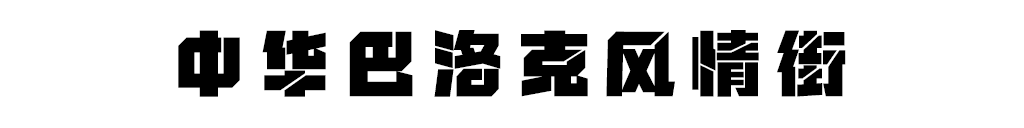
<style>
.page{position:relative;width:1024px;height:128px;background:#ffffff}
.page>*{position:absolute;margin:0}
.t1{font:71.8px "AaJiJiaHei";letter-spacing:0.2em;color:#000000}
</style>
<div class="page">
<p class="t1" style="left:178px;top:30px;width:668px;height:67px">中华巴洛克风情街</p>
</div>
